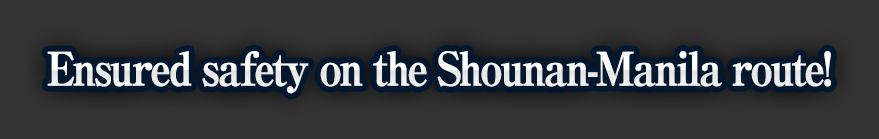
<style>
.page{position:relative;width:879px;height:139px;background:#333333}
.page>*{position:absolute;margin:0}
.t1{font:46px "RyuminPro-ExBold";letter-spacing:-0.08em;color:#ffffff;font-weight:bold;scale:0.9 1}
</style>
<div class="page">
<p class="t1" style="left:47px;top:51px;width:784px;height:43px">Ensured safety on the Shounan-Manila route!</p>
</div>
